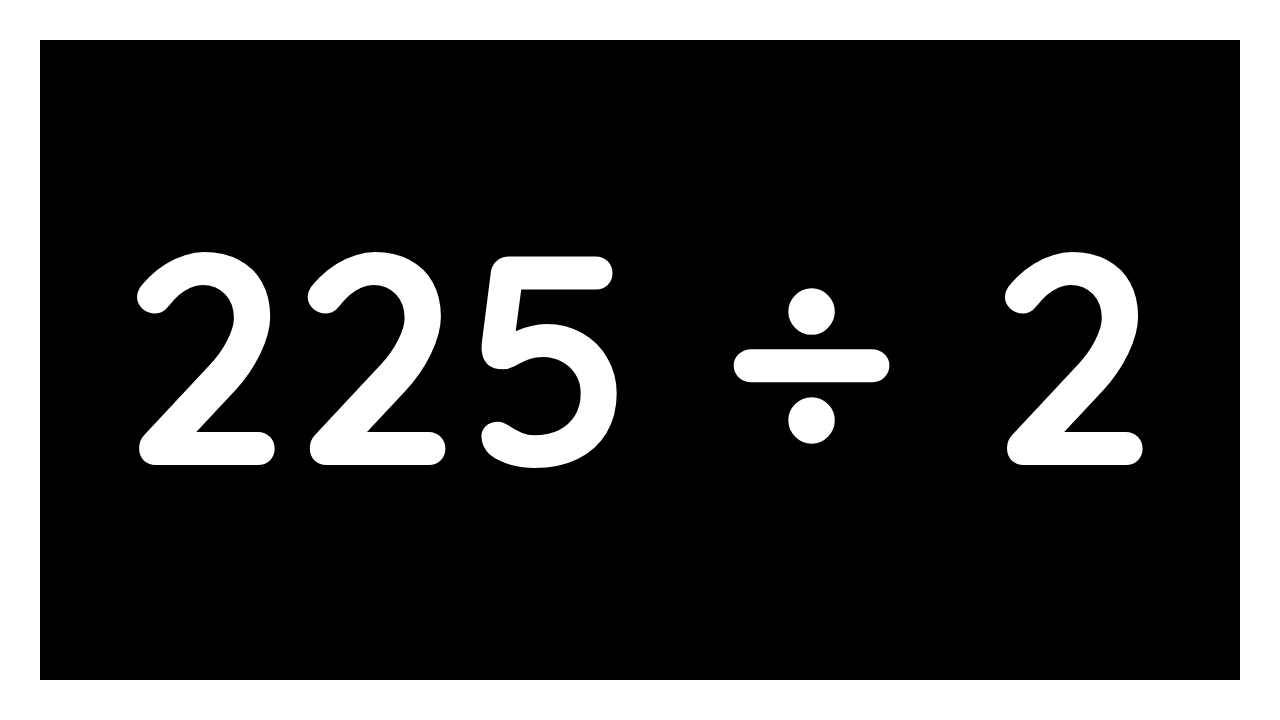
<style>
.page{position:relative;width:1280px;height:720px;background:#000000}
.page>*{position:absolute;margin:0}
.t1{font:300px "Quicksand-Bold";color:#ffffff}
</style>
<div class="page">
<p class="t1" style="left:137px;top:252px;width:1006px;height:216px">225 ÷ 2</p>
</div>
